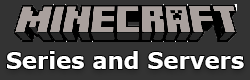
<style>
.page{position:relative;width:250px;height:80px;background:#333333}
.page>*{position:absolute;margin:0}
.t1{font:22.7px "Verdana-Bold";color:#ffffff}
</style>
<div class="page">
<p class="t1" style="left:7px;top:51px;width:237px;height:18px">Series and Servers</p>
</div>
